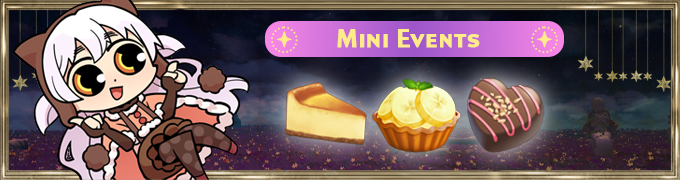
<style>
.page{position:relative;width:680px;height:180px}
.page>*{position:absolute;margin:0}
.t1{font:24.8px "Gibbs-Bold";color:#ffeb89;font-variant:small-caps;font-weight:bold}
</style>
<div class="page">
<p class="t1" style="left:337px;top:29px;width:143px;height:19px">Mini Events</p>
</div>
